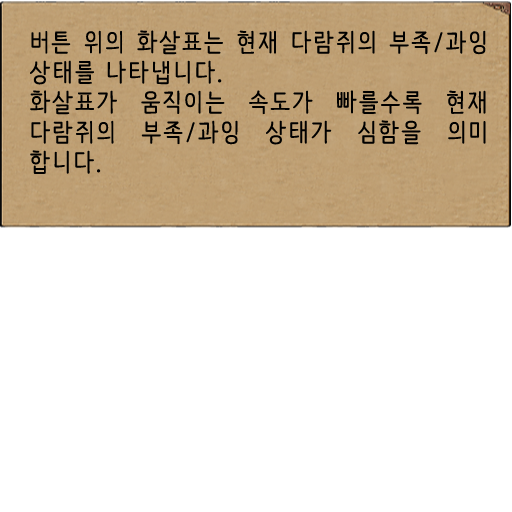
<style>
.page{position:relative;width:512px;height:512px;background:#ffffff}
.page>*{position:absolute;margin:0}
.t1{font:25px "NanumBarunpen";letter-spacing:0.075em;color:#000000;font-weight:bold}
</style>
<div class="page">
<p class="t1" style="left:30px;top:30px;width:456px;height:144px;text-align:justify">버튼 위의 화살표는 현재 다람쥐의 부족/과잉 상태를 나타냅니다.<br>화살표가 움직이는 속도가 빠를수록 현재 다람쥐의 부족/과잉 상태가 심함을 의미 합니다.</p>
</div>
